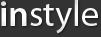
<style>
.page{position:relative;width:101px;height:37px;background:#333333}
.page>*{position:absolute;margin:0}
.t1{font:36px "MyriadPro-Regular";color:#ffffff}
.t2{font:36px "MyriadPro-Semibold";color:#ffffff}
</style>
<div class="page">
<p class="t1" style="left:1px;top:0px;width:97px;height:34px"><span class="t2">in</span>style</p>
</div>
